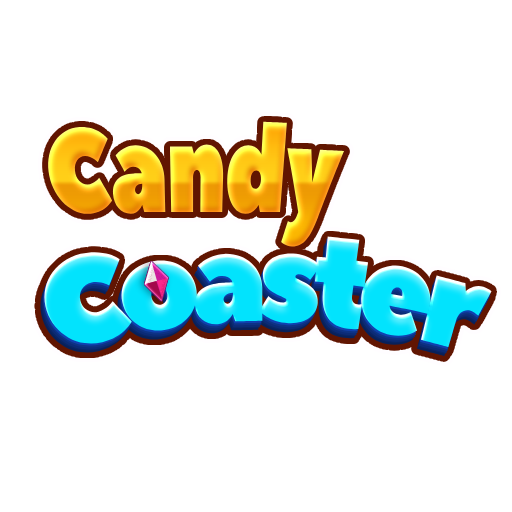
<style>
.page{position:relative;width:512px;height:512px;background:#ffffff}
.page>*{position:absolute;margin:0}
.t1{font:115px "PeaceSans";letter-spacing:-0.025em;scale:0.83 1}
.t2{font:124.6px "PeaceSans";letter-spacing:-0.075em;color:#02e3fd;scale:0.77 1}
</style>
<div class="page">
<p class="t1" style="left:48px;top:121px;width:297px;height:126px">Candy</p>
<p class="t2" style="left:44px;top:236px;width:448px;height:112px">Coaster</p>
</div>
